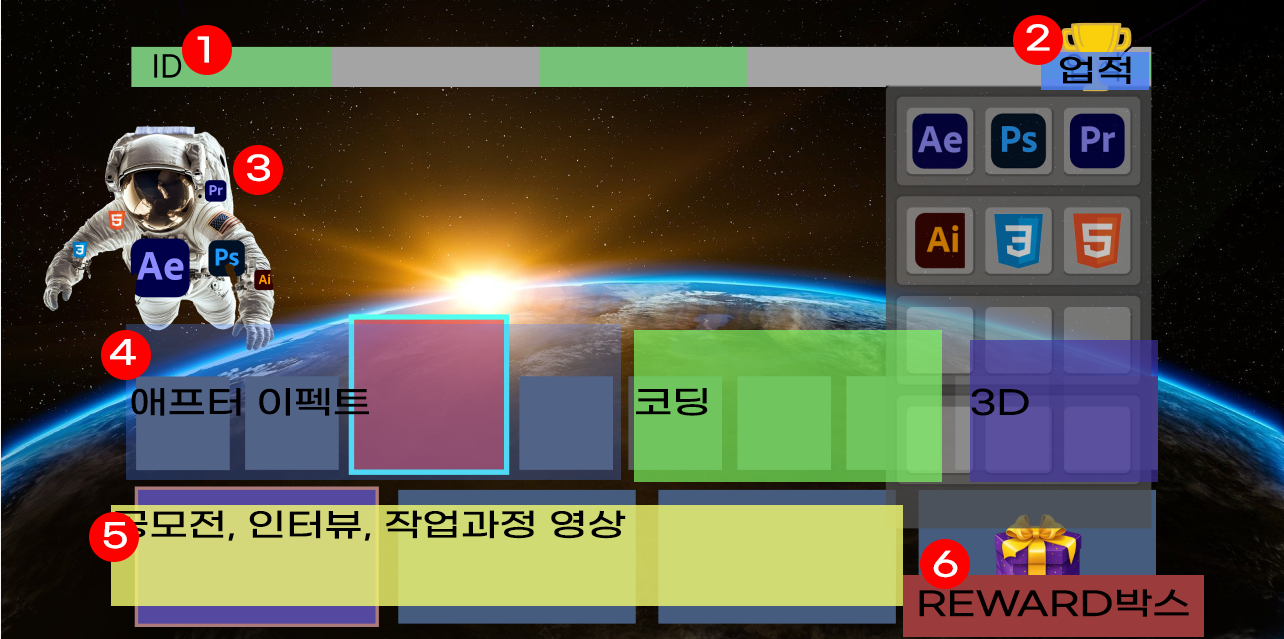
<style>
.page{position:relative;width:1284px;height:639px}
.page>*{position:absolute;margin:0}
.t1{font:32px "GmarketSansTTFMedium";color:#fefefe;scale:1.25 1}
.t2{font:32px "GmarketSansTTFMedium";color:#000000;scale:1.25 1}
</style>
<div class="page">
<p class="t1" style="left:1026px;top:24px;width:24px;height:27px">2</p>
<p class="t1" style="left:197px;top:36px;width:12px;height:27px">1</p>
<p class="t2" style="left:1060px;top:56px;width:71px;height:28px">업적</p>
<p class="t1" style="left:247px;top:154px;width:23px;height:28px">3</p>
<p class="t1" style="left:110px;top:339px;width:26px;height:26px">4</p>
<p class="t2" style="left:131px;top:388px;width:238px;height:28px">애프터 이펙트</p>
<p class="t2" style="left:636px;top:388px;width:72px;height:28px">코딩</p>
<p class="t2" style="left:971px;top:388px;width:58px;height:28px">3D</p>
<p class="t2" style="left:113px;top:510px;width:513px;height:31px">공모전, 인터뷰, 작업과정 영상</p>
<p class="t1" style="left:103px;top:522px;width:24px;height:27px">5</p>
<p class="t1" style="left:933px;top:550px;width:25px;height:28px">6</p>
<p class="t2" style="left:919px;top:589px;width:270px;height:28px">REWARD박스</p>
</div>
